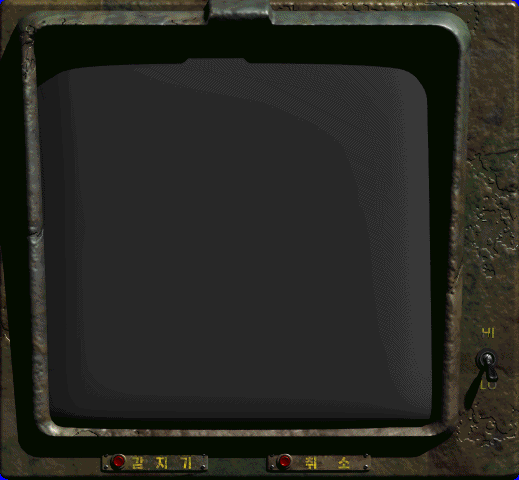
<style>
.page{position:relative;width:519px;height:480px;background:#282828}
.page>*{position:absolute;margin:0}
.t1{font:13px "HakgyoansimPosterB"}
</style>
<div class="page">
<p class="t1" style="left:132px;top:457px;width:59px;height:12px">감    지    기</p>
<p class="t1" style="left:305px;top:456px;width:45px;height:13px">취       소</p>
</div>
